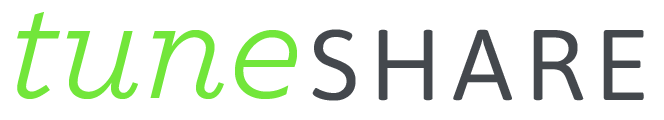
<style>
.page{position:relative;width:664px;height:120px;background:#ffffff}
.page>*{position:absolute;margin:0}
.t1{font:160px "Archer-BookItalic";color:#72e63a}
.t2{font:100px "Asap-Regular";letter-spacing:0.1em;color:#44484d;text-transform:uppercase}
</style>
<div class="page">
<p class="t1" style="left:17px;top:12px;width:280px;height:87px">tune</p>
<p class="t2" style="left:312px;top:29px;width:332px;height:72px">Share</p>
</div>
